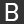
<style>
.page{position:relative;width:24px;height:24px;background:#333333}
.page>*{position:absolute;margin:0}
.t1{font:25px "Bahnschrift";color:#ffffff}
</style>
<div class="page">
<p class="t1" style="left:5px;top:3px;width:14px;height:18px">B</p>
</div>
